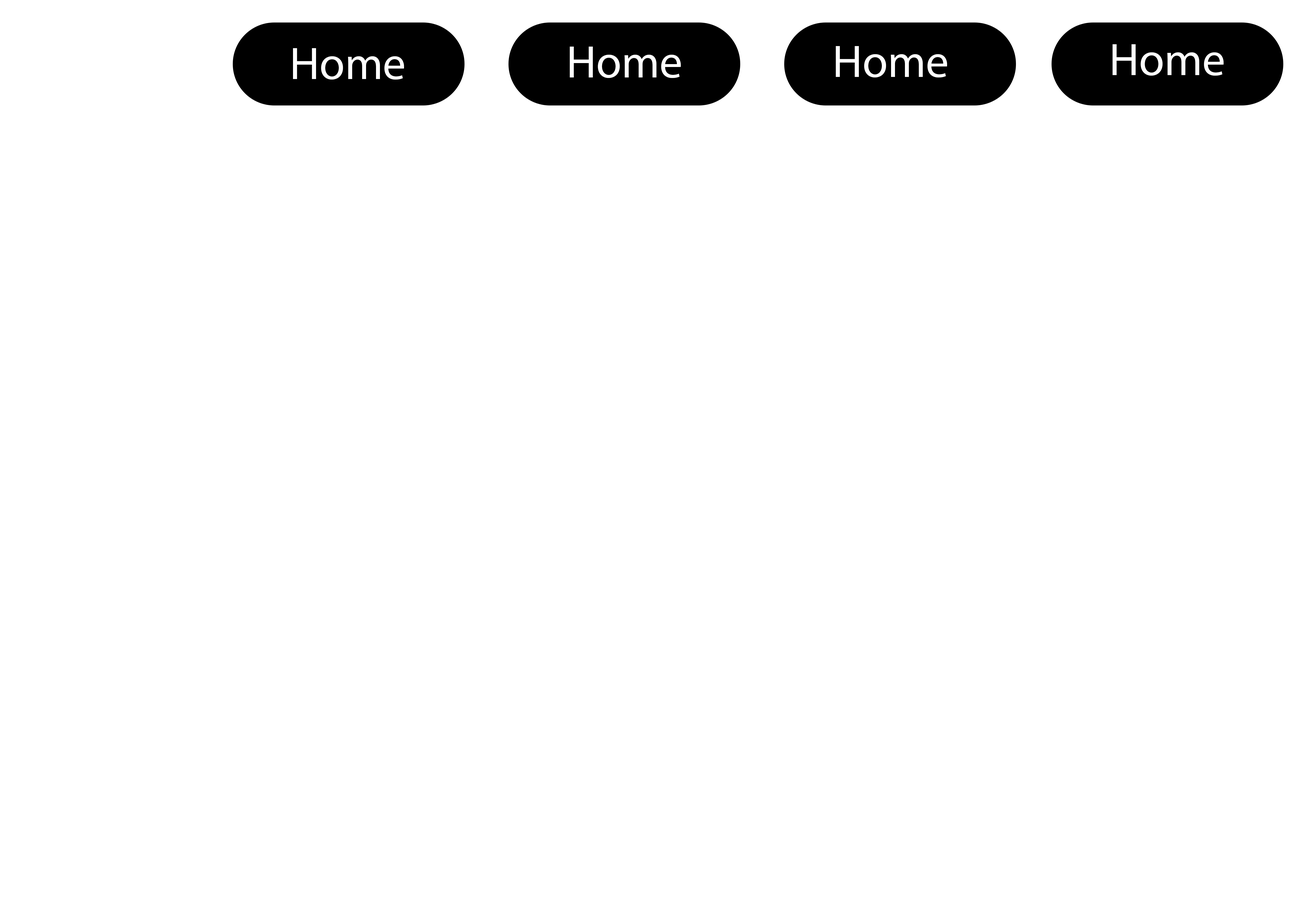
<style>
.page{position:relative;width:1299px;height:918px;background:#ffffff}
.page>*{position:absolute;margin:0}
.t1{font:45.8px "MyriadPro-Regular";color:#ffffff}
</style>
<div class="page">
<p class="t1" style="left:293px;top:48px;width:111px;height:32px">Home</p>
<p class="t1" style="left:570px;top:47px;width:111px;height:31px">Home</p>
<p class="t1" style="left:836px;top:46px;width:111px;height:32px">Home</p>
<p class="t1" style="left:1112px;top:44px;width:111px;height:32px">Home</p>
</div>
